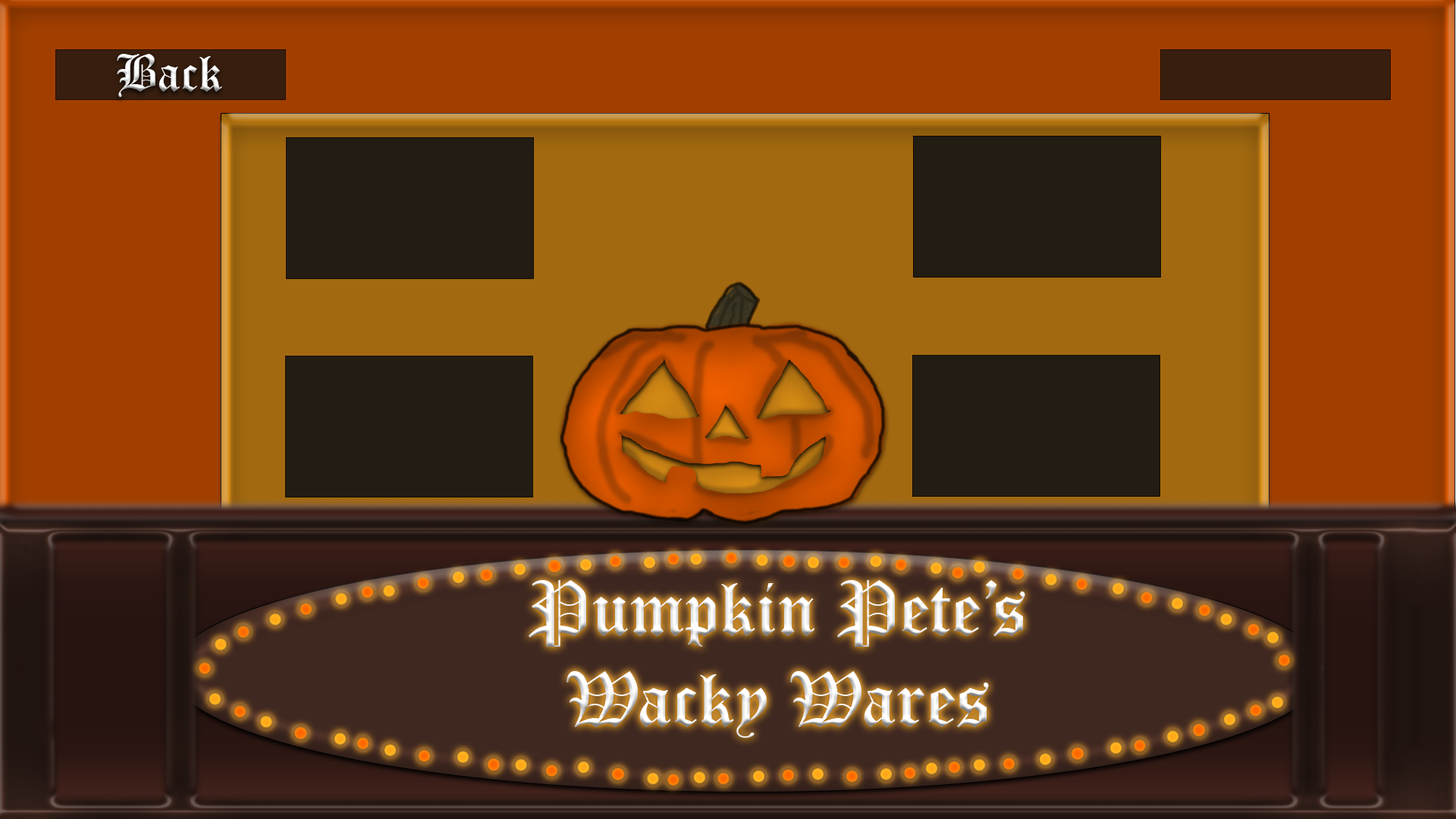
<style>
.page{position:relative;width:1456px;height:819px}
.page>*{position:absolute;margin:0}
.t1{font:50.6px "OldEnglishTextMT";color:#ffffff}
.t2{font:75.8px "OldEnglishTextMT";color:#ffffff}
</style>
<div class="page">
<p class="t1" style="left:117px;top:54px;width:105px;height:43px">Back</p>
<p class="t2" style="left:529px;top:580px;width:496px;height:158px;text-align:center">Pumpkin Pete’s<br>Wacky Wares</p>
</div>
